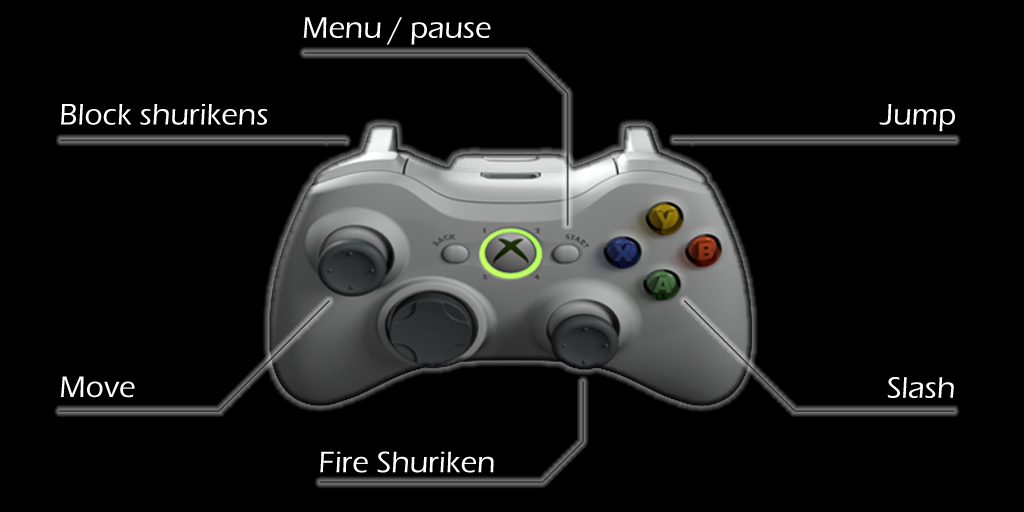
<style>
.page{position:relative;width:1024px;height:512px;background:#000000}
.page>*{position:absolute;margin:0}
.t1{font:30.8px "ErasITC-Medium";color:#ffffff}
</style>
<div class="page">
<p class="t1" style="left:303px;top:17px;width:188px;height:28px">Menu / pause</p>
<p class="t1" style="left:61px;top:104px;width:207px;height:21px">Block shurikens</p>
<p class="t1" style="left:879px;top:104px;width:76px;height:28px">Jump</p>
<p class="t1" style="left:61px;top:376px;width:74px;height:22px">Move</p>
<p class="t1" style="left:887px;top:377px;width:67px;height:21px">Slash</p>
<p class="t1" style="left:320px;top:451px;width:174px;height:22px">Fire Shuriken</p>
</div>
